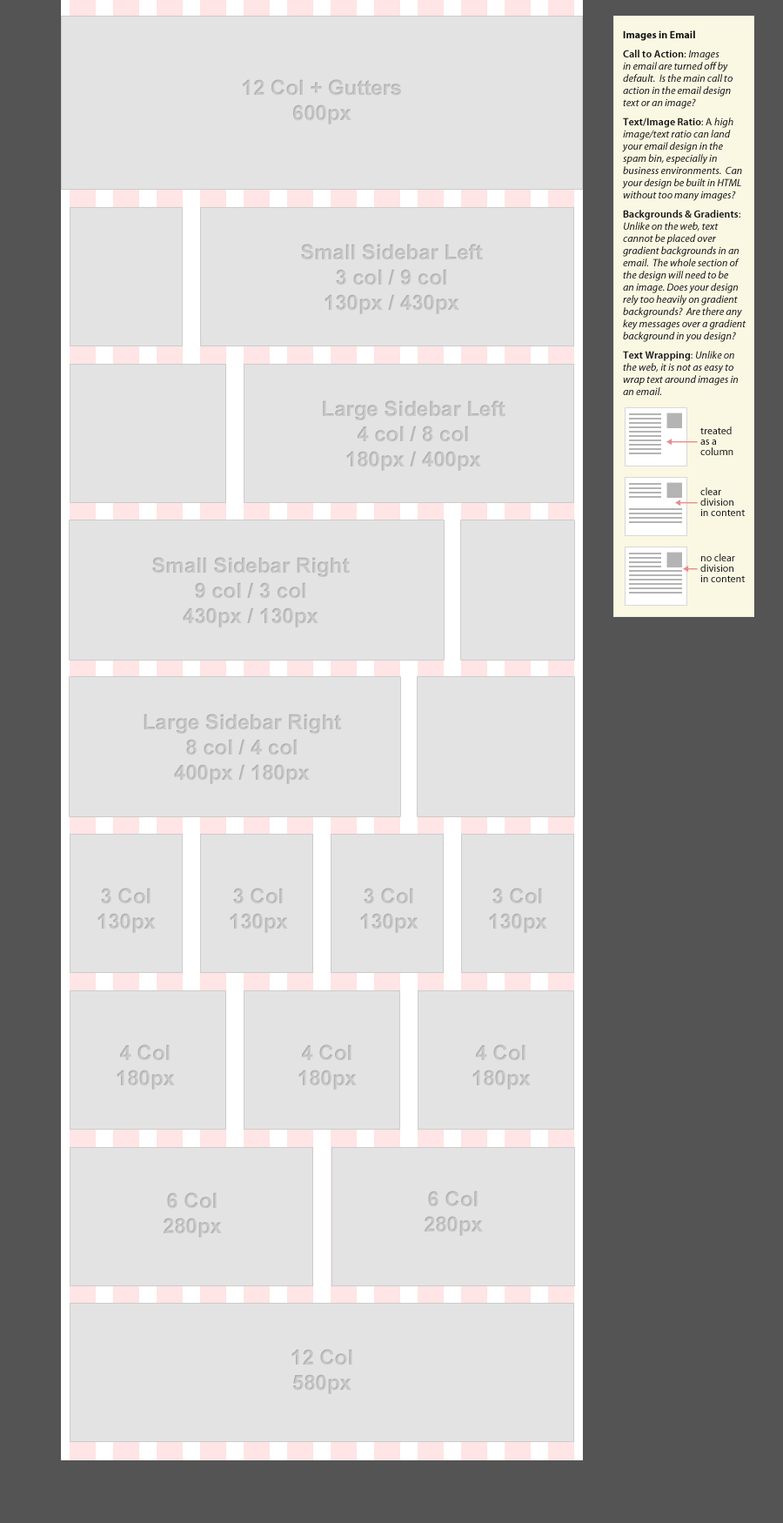
<style>
.page{position:relative;width:783px;height:1523px;background:#e3e3e3}
.page>*{position:absolute;margin:0}
.t1{font:10.4px/12.2px "MyriadPro-It";color:#121212}
.t2{font:10.4px/12.2px "MyriadPro-Bold";color:#121212}
.t3{font:10.4px/12.2px "MyriadPro-Semibold";color:#121212}
.t4{font:10.4px/12.2px "MyriadPro-Regular";color:#121212}
.t5{font:20.9px "Arial-BoldMT";color:#cbcbcb}
.t6{font:10.4px/10.4px "MyriadPro-Regular";color:#121212}
</style>
<div class="page">
<p class="t1" style="left:622px;top:30px;width:125px;height:365px"><span class="t2">Images in Email<br></span><span class="t3">Call to Action</span><span class="t4">: </span>Images in email are turned off by default.  Is the main call to action in the email design text or an image?<br><span class="t3">Text/Image Ratio</span><span class="t4">: A </span>high image/text ratio can land your email design in the spam bin, especially in business environments.  Can your design be built in HTML without too many images?<br><span class="t3">Backgrounds &amp; Gradients</span><span class="t4">: </span>Unlike on the web, text cannot be placed over gradient backgrounds in an email.  The whole section of the design will need to be an image. Does your design rely too heavily on gradient backgrounds?  Are there any key messages over a gradient background in you design?<br><span class="t3">Text Wrapping</span><span class="t4">: </span>Unlike on the web, it is not as easy to wrap text around images in an email.</p>
<p class="t5" style="left:243px;top:79px;width:158px;height:45px;text-align:center">12 Col + Gutters<br>600px</p>
<p class="t5" style="left:301px;top:244px;width:182px;height:70px;text-align:center">Small Sidebar Left<br>3 col / 9 col<br>130px / 430px</p>
<p class="t5" style="left:323px;top:400px;width:183px;height:71px;text-align:center">Large Sidebar Left<br>4 col / 8 col<br>180px / 400px</p>
<p class="t6" style="left:700px;top:426px;width:34px;height:29px">treated <br>as a<br>column</p>
<p class="t6" style="left:700px;top:487px;width:45px;height:29px">clear<br>division<br>in content</p>
<p class="t5" style="left:152px;top:557px;width:198px;height:70px;text-align:center">Small Sidebar Right<br>9 col / 3 col<br>430px / 130px</p>
<p class="t6" style="left:700px;top:553px;width:45px;height:29px">no clear<br>division<br>in content</p>
<p class="t5" style="left:144px;top:713px;width:197px;height:71px;text-align:center">Large Sidebar Right<br>8 col / 4 col<br>400px / 180px</p>
<p class="t5" style="left:97px;top:888px;width:59px;height:45px;text-align:center">3 Col<br>130px</p>
<p class="t5" style="left:230px;top:888px;width:58px;height:45px;text-align:center">3 Col<br>130px</p>
<p class="t5" style="left:360px;top:888px;width:59px;height:45px;text-align:center">3 Col<br>130px</p>
<p class="t5" style="left:489px;top:888px;width:58px;height:45px;text-align:center">3 Col<br>130px</p>
<p class="t5" style="left:117px;top:1044px;width:58px;height:45px;text-align:center">4 Col<br>180px</p>
<p class="t5" style="left:298px;top:1044px;width:59px;height:45px;text-align:center">4 Col<br>180px</p>
<p class="t5" style="left:472px;top:1044px;width:59px;height:45px;text-align:center">4 Col<br>180px</p>
<p class="t5" style="left:164px;top:1192px;width:58px;height:45px;text-align:center">6 Col<br>280px</p>
<p class="t5" style="left:425px;top:1190px;width:58px;height:46px;text-align:center">6 Col<br>280px</p>
<p class="t5" style="left:291px;top:1349px;width:61px;height:45px;text-align:center">12 Col<br>580px</p>
</div>
